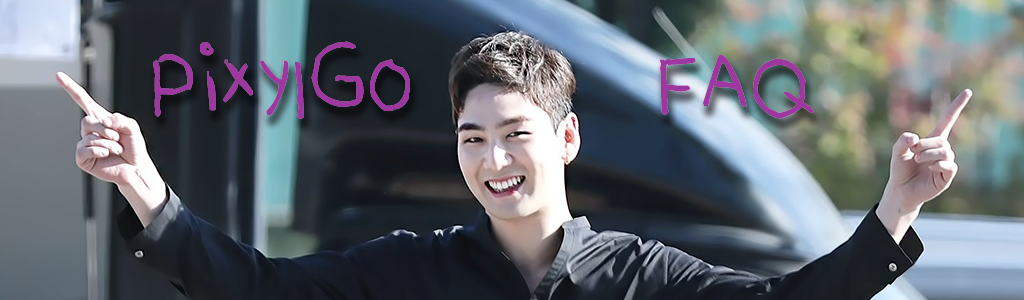
<style>
.page{position:relative;width:1024px;height:300px}
.page>*{position:absolute;margin:0}
.t1{font:100px "UhBeeARyongBold";color:#9f37a0}
</style>
<div class="page">
<p class="t1" style="left:153px;top:41px;width:257px;height:79px">PixylGO</p>
<p class="t1" style="left:660px;top:54px;width:154px;height:65px">FAQ</p>
</div>
